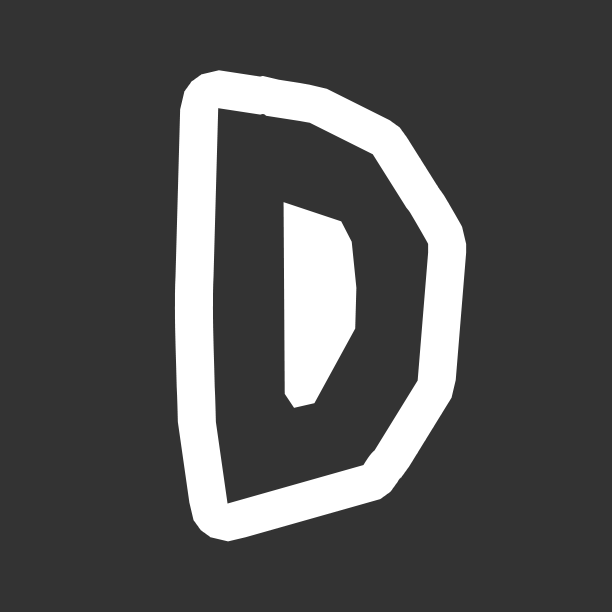
<style>
.page{position:relative;width:612px;height:612px;background:#333333}
.page>*{position:absolute;margin:0}
.t1{font:583px "DKSnippitySnap";letter-spacing:0.04em;color:#333333}
</style>
<div class="page">
<p class="t1" style="left:212px;top:108px;width:217px;height:396px">D</p>
</div>
